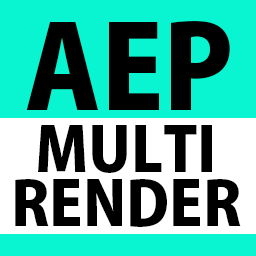
<style>
.page{position:relative;width:256px;height:256px;background:#09f5d1}
.page>*{position:absolute;margin:0}
.t1{font:114px "KozGoPr6N-Heavy";color:#000000}
.t2{font:61px/54px "KozGoPr6N-Heavy";color:#000000}
</style>
<div class="page">
<p class="t1" style="left:26px;top:21px;width:204px;height:89px">AEP</p>
<p class="t2" style="left:15px;top:125px;width:226px;height:102px;text-align:center">MULTI<br>RENDER</p>
</div>
